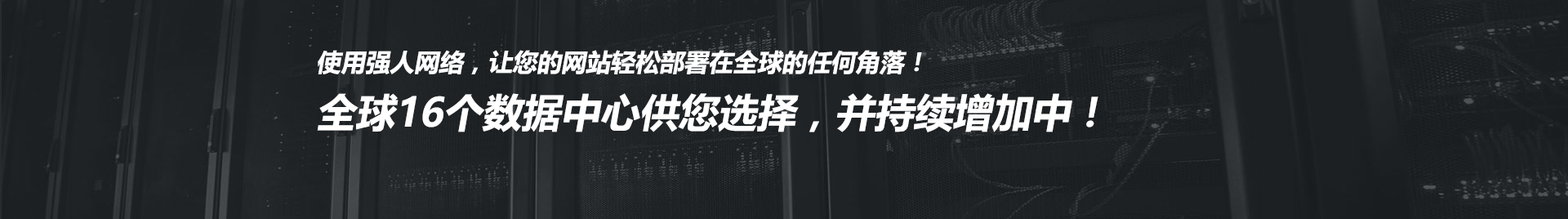
<style>
.page{position:relative;width:1568px;height:219px}
.page>*{position:absolute;margin:0}
.t1{font:24.5px "MicrosoftYaHei-Bold";color:#ffffff;font-style:italic}
.t2{font:39.2px "MicrosoftYaHei-Bold";color:#ffffff;font-style:italic}
</style>
<div class="page">
<p class="t1" style="left:317px;top:50px;width:781px;height:82px">使用强人网络，让您的网站轻松部署在全球的任何角落！<br><span class="t2">全球16个数据中心供您选择，并持续增加中！</span></p>
</div>
